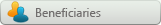
<style>
.page{position:relative;width:161px;height:25px}
.page>*{position:absolute;margin:0}
.t1{font:12px "SegoeUI";color:#706d6d}
</style>
<div class="page">
<p class="t1" style="left:36px;top:8px;width:65px;height:9px">Beneficiaries</p>
</div>
